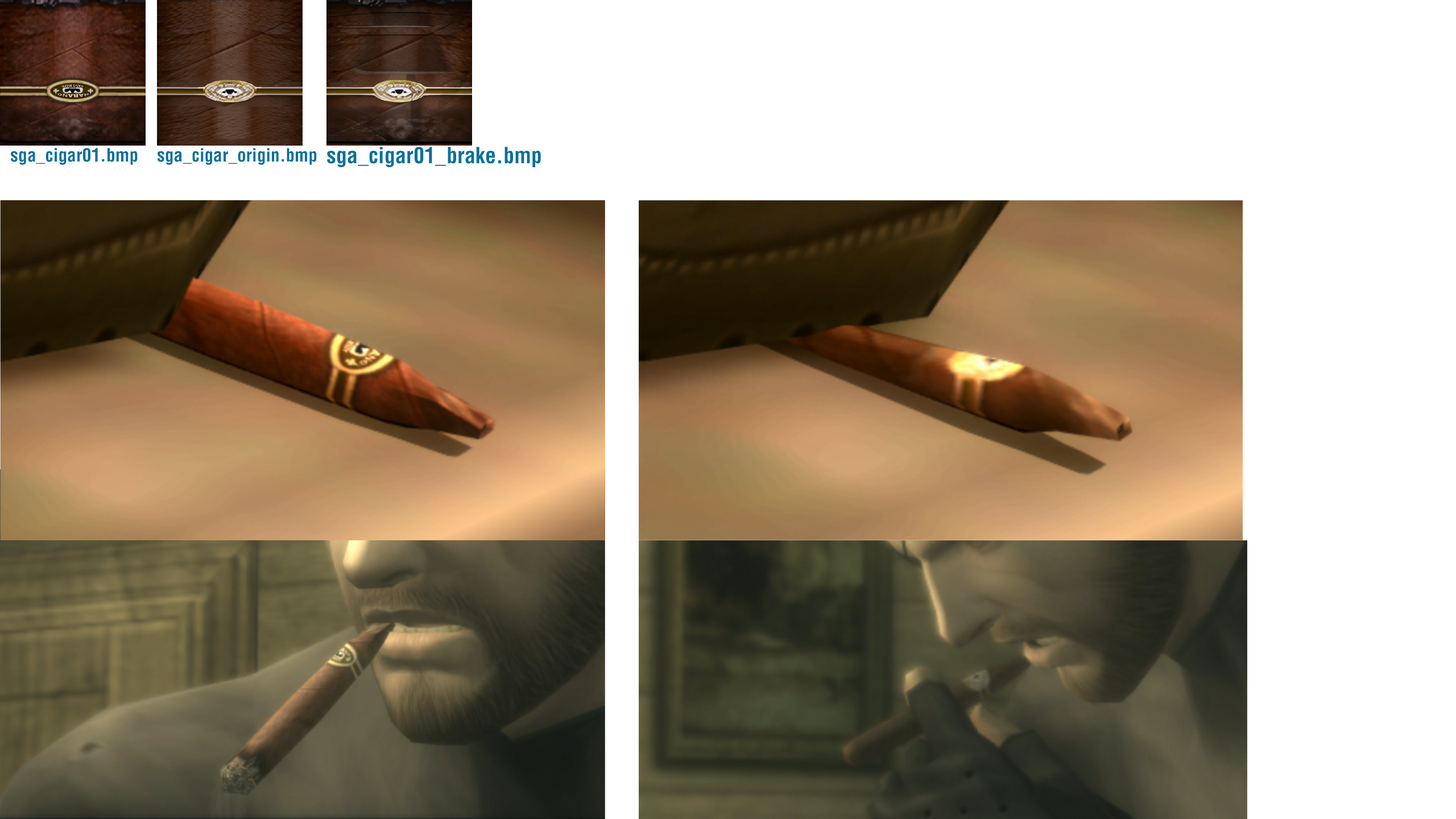
<style>
.page{position:relative;width:1456px;height:819px;background:#ffffff}
.page>*{position:absolute;margin:0}
.t1{font:18px "Helvetica-Condensed-Bold";color:#00709d}
.t2{font:17.8px "Helvetica-Condensed-Bold";color:#00709d}
.t3{font:21.8px "Helvetica-Condensed-Bold";color:#00709d}
</style>
<div class="page">
<p class="t1" style="left:11px;top:148px;width:127px;height:17px">sga_cigar01.bmp</p>
<p class="t2" style="left:158px;top:148px;width:159px;height:17px">sga_cigar_origin.bmp</p>
<p class="t3" style="left:327px;top:147px;width:214px;height:20px">sga_cigar01_brake.bmp</p>
</div>
